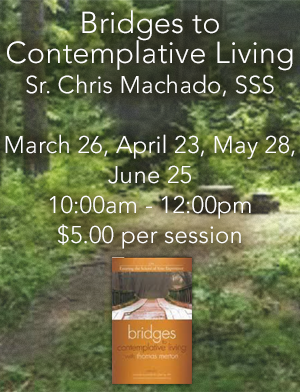
<style>
.page{position:relative;width:300px;height:392px}
.page>*{position:absolute;margin:0}
.t1{font:24px/30px "Avenir-Light";letter-spacing:0.01em;color:#ffffff}
.t2{font:30px/30px "Avenir-Light";letter-spacing:0.01em;color:#ffffff}
</style>
<div class="page">
<p class="t1" style="left:5px;top:10px;width:290px;height:239px;text-align:center"><span class="t2">Bridges to Contemplative Living<br></span>Sr. Chris Machado, SSS<br><br>March 26, April 23, May 28, June 25<br>10:00am - 12:00pm<br>$5.00 per session</p>
</div>
